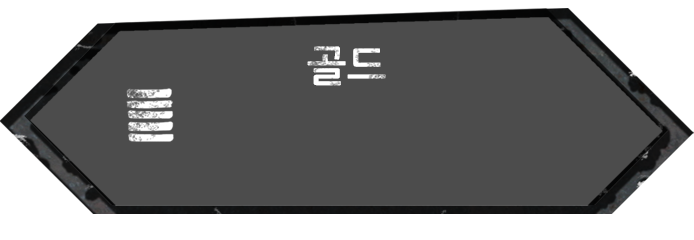
<style>
.page{position:relative;width:694px;height:240px;background:#4c4c4c}
.page>*{position:absolute;margin:0}
.t1{font:10.1px "NanumGothicBold";color:#ffffff}
</style>
<div class="page">
<p class="t1" style="left:307px;top:46px;width:79px;height:40px;text-align:center">골드</p>
</div>
